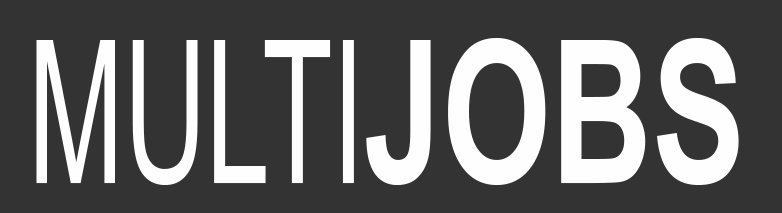
<style>
.page{position:relative;width:782px;height:213px;background:#333333}
.page>*{position:absolute;margin:0}
.t1{font:200px "ArialNarrow";color:#fffefe;scale:0.7 1}
.t2{font:200px "Arial-BoldMT";color:#fffefe;scale:0.7 1}
</style>
<div class="page">
<p class="t1" style="left:36px;top:38px;width:703px;height:147px">MULTI<span class="t2">JOBS</span></p>
</div>
